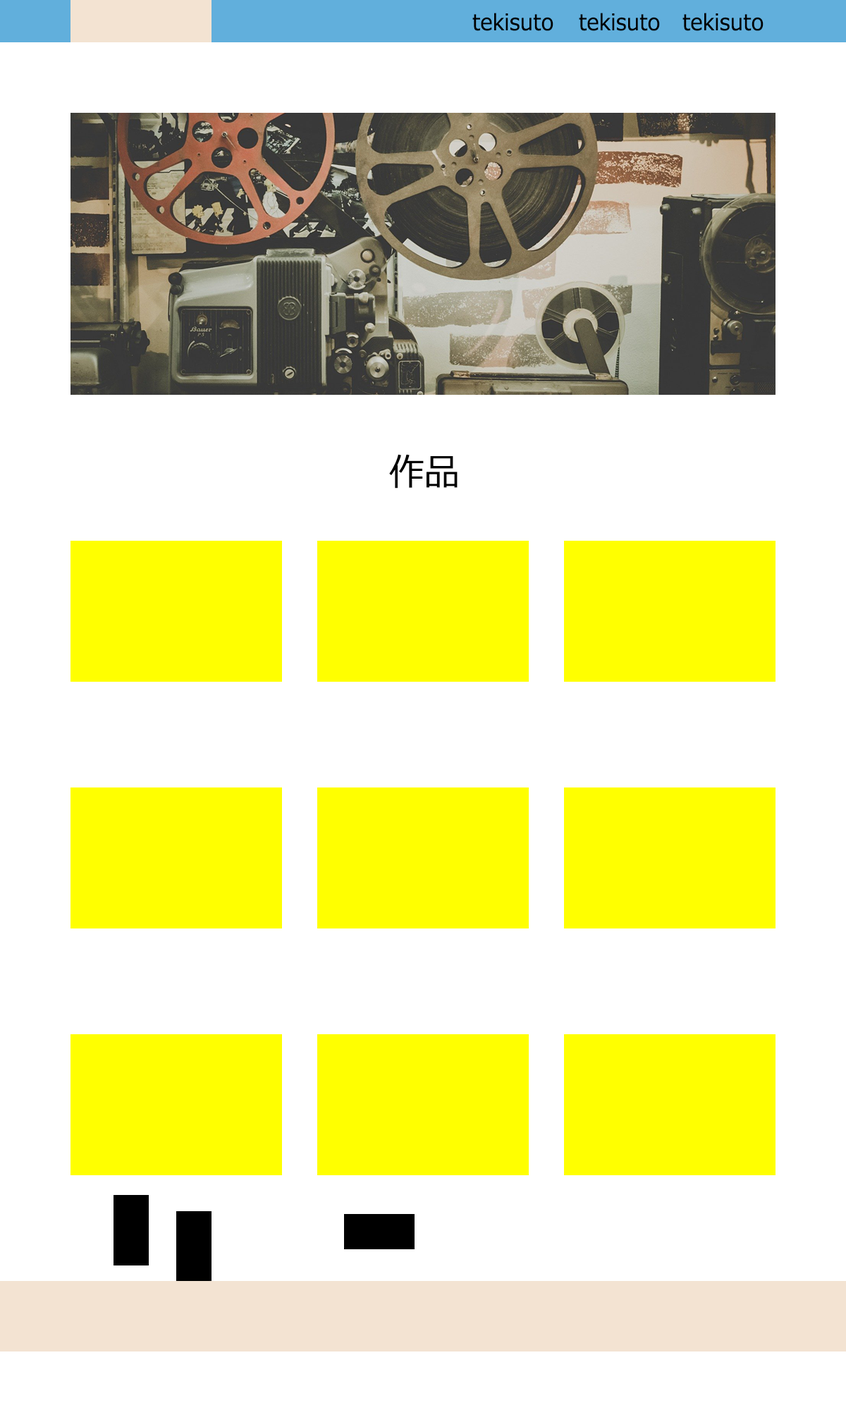
<style>
.page{position:relative;width:846px;height:1410px;background:#ffffff}
.page>*{position:absolute;margin:0}
.t1{font:22.4px "Meiryo";color:#000000;scale:0.94 1}
.t2{font:37.4px "Meiryo";color:#000000;scale:0.94 1}
</style>
<div class="page">
<p class="t1" style="left:472px;top:13px;width:81px;height:18px">tekisuto</p>
<p class="t1" style="left:579px;top:13px;width:81px;height:18px">tekisuto</p>
<p class="t1" style="left:682px;top:13px;width:81px;height:18px">tekisuto</p>
<p class="t2" style="left:389px;top:454px;width:68px;height:34px">作品</p>
</div>
